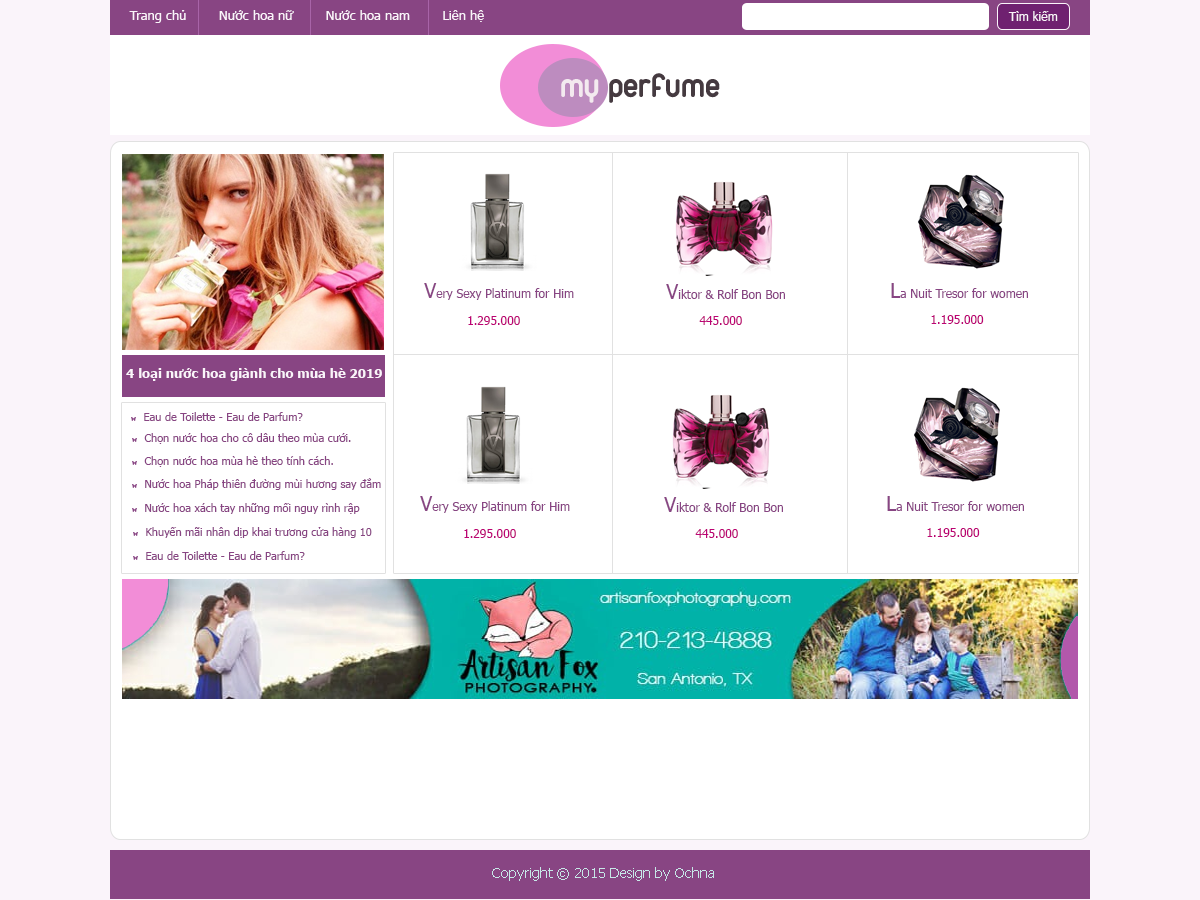
<style>
.page{position:relative;width:1200px;height:900px;background:#ffffff}
.page>*{position:absolute;margin:0}
.t1{font:13px "Tahoma";color:#faf4fa}
.t2{font:12px "Tahoma";color:#faf4fa}
.t3{font:36px "UTMDuepuntozeroBold";color:#453a40}
.t4{font:36px "UTMDuepuntozeroBold";color:#f3eaef}
.t5{font:12px "Tahoma";color:#884583}
.t6{font:20px "Tahoma";color:#884583}
.t7{font:12px "Tahoma";color:#bc0374}
.t8{font:13px "Tahoma-Bold";color:#faf4fa}
.t9{font:11px "Tahoma";color:#884583}
.t10{font:14px "Tahoma";color:#c7e8e8}
</style>
<div class="page">
<p class="t1" style="left:129px;top:10px;width:355px;height:13px">Trang chủ        Nước hoa nữ        Nước hoa nam        Liên hệ</p>
<p class="t2" style="left:1008px;top:11px;width:50px;height:10px">Tìm kiếm</p>
<p class="t3" style="left:561px;top:73px;width:159px;height:30px"><span class="t4">my</span> perfume</p>
<p class="t5" style="left:424px;top:283px;width:150px;height:17px"><span class="t6">V</span>ery Sexy Platinum for Him</p>
<p class="t5" style="left:666px;top:284px;width:119px;height:15px"><span class="t6">V</span>iktor &amp; Rolf Bon Bon</p>
<p class="t5" style="left:891px;top:283px;width:137px;height:15px"><span class="t6">L</span>a Nuit Tresor for women</p>
<p class="t7" style="left:468px;top:316px;width:52px;height:9px">1.295.000</p>
<p class="t7" style="left:699px;top:316px;width:43px;height:9px">445.000</p>
<p class="t7" style="left:931px;top:315px;width:53px;height:9px">1.195.000</p>
<p class="t8" style="left:126px;top:368px;width:256px;height:13px">4 loại nước hoa giành cho mùa hè 2019</p>
<p class="t9" style="left:144px;top:412px;width:159px;height:9px">Eau de Toilette - Eau de Parfum?</p>
<p class="t9" style="left:144px;top:433px;width:207px;height:11px">Chọn nước hoa cho cô dâu theo mùa cưới.</p>
<p class="t9" style="left:144px;top:456px;width:189px;height:11px">Chọn nước hoa mùa hè theo tính cách.</p>
<p class="t9" style="left:145px;top:478px;width:236px;height:12px">Nước hoa Pháp thiên đường mùi hương say đắm</p>
<p class="t5" style="left:420px;top:496px;width:150px;height:17px"><span class="t6">V</span>ery Sexy Platinum for Him</p>
<p class="t5" style="left:664px;top:497px;width:119px;height:15px"><span class="t6">V</span>iktor &amp; Rolf Bon Bon</p>
<p class="t5" style="left:887px;top:496px;width:137px;height:15px"><span class="t6">L</span>a Nuit Tresor for women</p>
<p class="t9" style="left:145px;top:503px;width:215px;height:11px">Nước hoa xách tay những mối nguy rình rập</p>
<p class="t9" style="left:146px;top:527px;width:226px;height:11px">Khuyến mãi nhân dịp khai trương cửa hàng 10</p>
<p class="t7" style="left:464px;top:529px;width:52px;height:9px">1.295.000</p>
<p class="t7" style="left:695px;top:529px;width:43px;height:9px">445.000</p>
<p class="t7" style="left:927px;top:528px;width:53px;height:9px">1.195.000</p>
<p class="t9" style="left:146px;top:551px;width:159px;height:9px">Eau de Toilette - Eau de Parfum?</p>
<p class="t10" style="left:492px;top:867px;width:222px;height:14px">Copyright © 2015 Design by Ochna</p>
</div>
